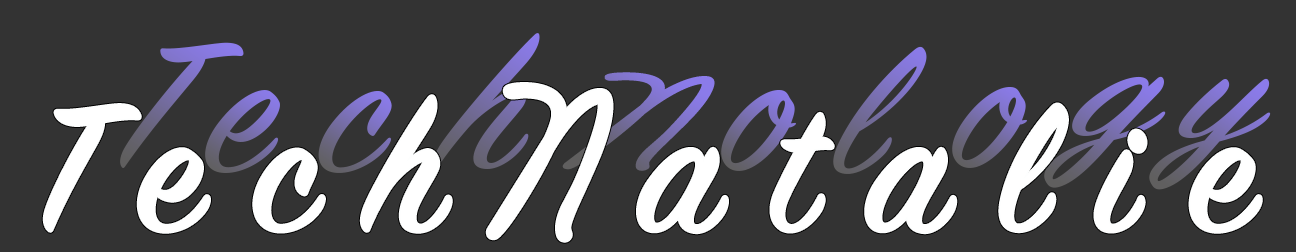
<style>
.page{position:relative;width:1296px;height:252px;background:#333333}
.page>*{position:absolute;margin:0}
.t1{font:207.2px "SignPainter-HouseScript";letter-spacing:0.26em;scale:0.97 1}
.t2{font:149.2px "SignPainter-HouseScript";scale:0.97 1}
.t3{font:130px "Rebecca";letter-spacing:0.26em;scale:1.61 1}
.t4{font:130px "SignPainter-HouseScript";scale:1.61 1}
.t5{font:150px "SignPainter-HouseScript";letter-spacing:0.26em;scale:1.37 1}
.t6{font:150px "SignPainter-HouseScript";scale:1.37 1}
.t7{font:200px "SignPainter-HouseScript";letter-spacing:0.26em;color:#ffffff}
.t8{font:144px "SignPainter-HouseScript";color:#363639}
.t9{font:200px "Rebecca";letter-spacing:0.26em;color:#ffffff}
.t10{font:207.2px "SignPainter-HouseScript";scale:0.97 1}
</style>
<div class="page">
<p class="t1" style="left:433px;top:33px;width:107px;height:136px"><span class="t2"><br></span>h</p>
<p class="t1" style="left:120px;top:42px;width:124px;height:126px"><span class="t2"><br></span>T</p>
<p class="t1" style="left:833px;top:46px;width:94px;height:128px"><span class="t2"><br></span>l</p>
<p class="t3" style="left:562px;top:72px;width:153px;height:99px"><span class="t4"><br></span>N</p>
<p class="t5" style="left:1044px;top:76px;width:122px;height:112px"><span class="t6"><br></span>g</p>
<p class="t5" style="left:1149px;top:78px;width:122px;height:112px"><span class="t6"><br></span>y</p>
<p class="t7" style="left:44px;top:84px;width:1217px;height:157px"><span class="t8"><br><br><br><br><br><br><br><br><br><br><br></span>Tech<span class="t9">N</span>atalie</p>
<p class="t7" style="left:44px;top:84px;width:1217px;height:157px"><span class="t8"><br><br><br><br><br><br><br><br><br><br><br></span>Tech<span class="t9">N</span>atalie</p>
<p class="t1" style="left:952px;top:87px;width:75px;height:81px"><span class="t2"><br></span>o</p>
<p class="t1" style="left:205px;top:90px;width:75px;height:83px"><span class="t2"><br></span>e</p>
<p class="t1" style="left:318px;top:91px;width:74px;height:82px"><span class="t2"><br></span>c</p>
<p class="t10" style="left:721px;top:90px;width:75px;height:81px"><span class="t2"><br></span>o</p>
</div>
